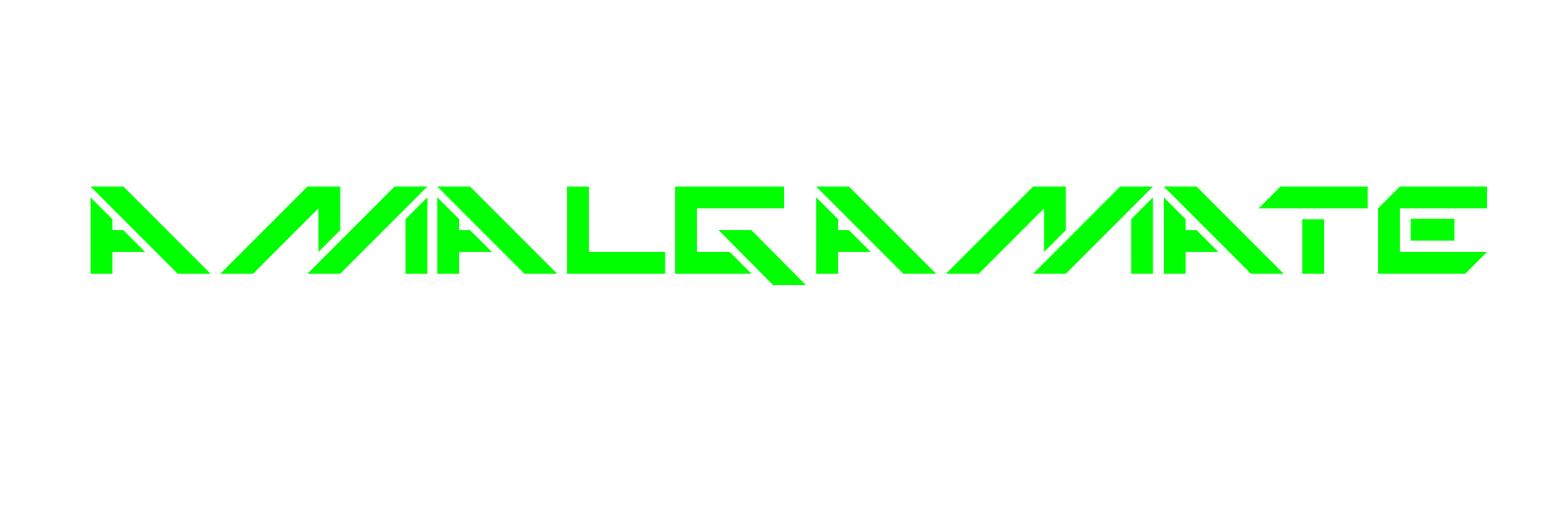
<style>
.page{position:relative;width:1568px;height:523px;background:#ffffff}
.page>*{position:absolute;margin:0}
.t1{font:174.2px "TechnoHideo";color:#00ff00}
</style>
<div class="page">
<p class="t1" style="left:91px;top:186px;width:1396px;height:99px">amalgamate</p>
</div>
